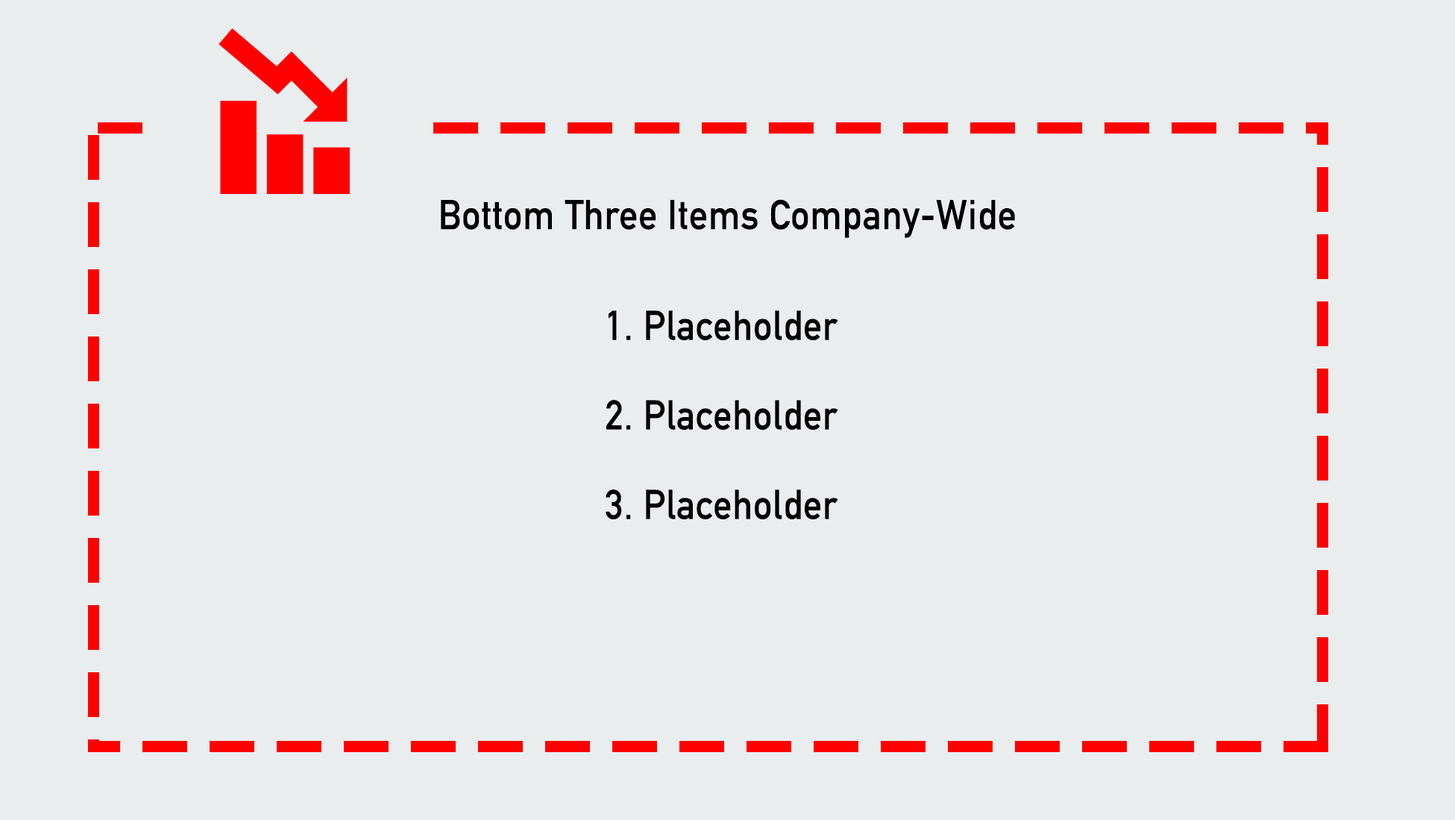
<style>
.page{position:relative;width:1455px;height:820px;background:#e9edee}
.page>*{position:absolute;margin:0}
.t1{font:41px "DINAlternate-Bold";letter-spacing:0.02em;color:#000000;scale:0.91 1}
</style>
<div class="page">
<p class="t1" style="left:441px;top:199px;width:574px;height:39px">Bottom Three Items Company-Wide</p>
<p class="t1" style="left:606px;top:310px;width:232px;height:209px;text-align:center">1. Placeholder<br><br>2. Placeholder<br><br>3. Placeholder</p>
</div>
